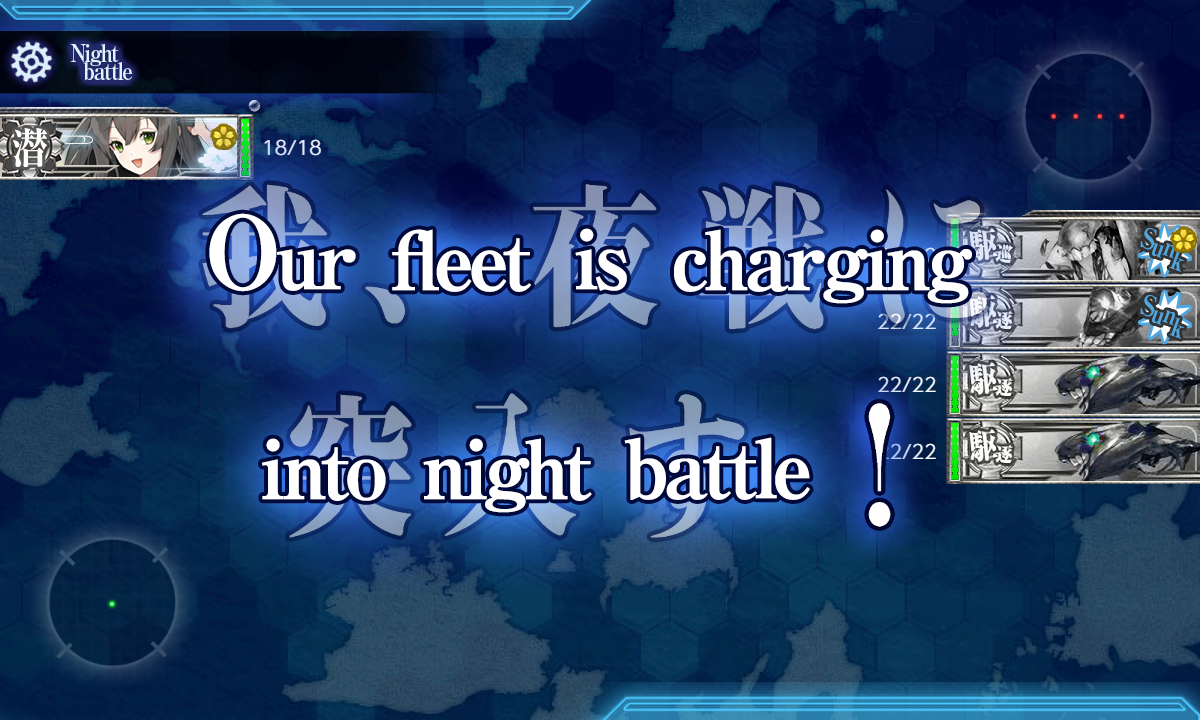
<style>
.page{position:relative;width:1200px;height:720px}
.page>*{position:absolute;margin:0}
.t1{font:80px "RyuminPro-ExBold";letter-spacing:-0.08em;color:#ffffff;font-weight:bold}
.t2{font:100px "RyuminPro-ExBold";letter-spacing:-0.08em;color:#ffffff;font-weight:bold}
</style>
<div class="page">
<p class="t1" style="left:209px;top:213px;width:147px;height:79px"><span class="t2">O</span>ur</p>
<p class="t1" style="left:392px;top:229px;width:139px;height:63px">fleet</p>
<p class="t1" style="left:575px;top:228px;width:52px;height:63px">is</p>
<p class="t1" style="left:674px;top:229px;width:151px;height:63px">char</p>
<p class="t1" style="left:823px;top:229px;width:149px;height:75px">ging</p>
<p class="t1" style="left:262px;top:438px;width:124px;height:63px">into</p>
<p class="t1" style="left:423px;top:438px;width:169px;height:75px">night</p>
<p class="t1" style="left:624px;top:437px;width:186px;height:63px">battle</p>
</div>
